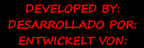
<style>
.page{position:relative;width:144px;height:48px;background:#000000}
.page>*{position:absolute;margin:0}
.t1{font:11px "SegoePrint-Bold";color:#ff0000}
</style>
<div class="page">
<p class="t1" style="left:26px;top:4px;width:94px;height:9px">DEVELOPED BY:</p>
<p class="t1" style="left:8px;top:20px;width:129px;height:9px">DESARROLLADO POR:</p>
<p class="t1" style="left:18px;top:36px;width:109px;height:9px">ENTWICKELT VON:</p>
</div>
